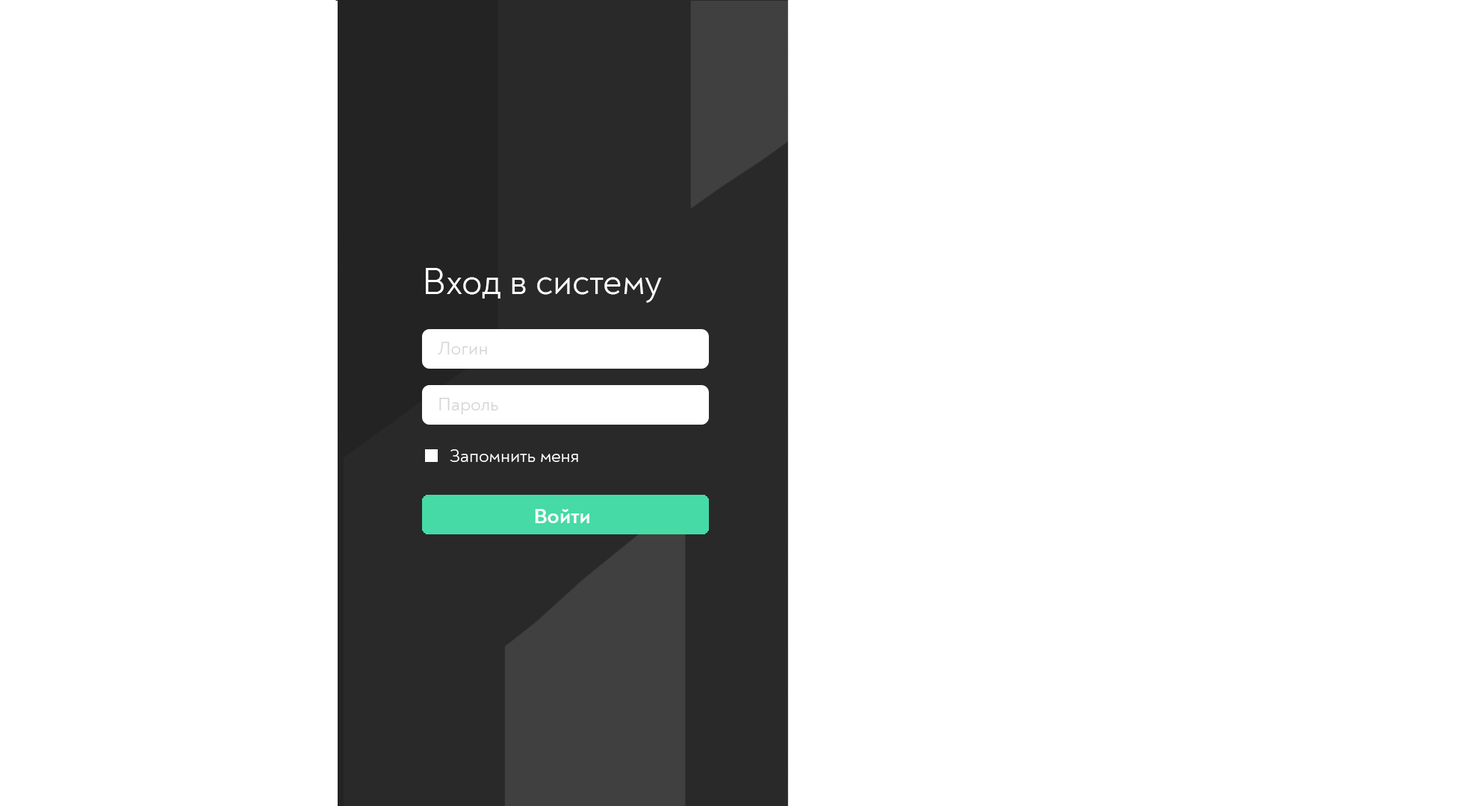
<style>
.page{position:relative;width:1479px;height:806px;background:#ffffff}
.page>*{position:absolute;margin:0}
.t1{font:9px "Noah-Regular";color:#ffffff}
.t2{font:18.7px "Noah-Regular";color:#d5d5d5}
.t3{font:18.7px "Noah-Regular";color:#ffffff}
.t4{font:21.8px "Noah-Bold";color:#ffffff}
</style>
<div class="page">
<p class="t1" style="left:426px;top:268px;width:236px;height:35px">Вход в систему</p>
<p class="t2" style="left:438px;top:342px;width:49px;height:13px">Логин</p>
<p class="t2" style="left:439px;top:398px;width:59px;height:16px">Пароль</p>
<p class="t3" style="left:450px;top:450px;width:128px;height:12px">Запомнить меня</p>
<p class="t4" style="left:535px;top:509px;width:54px;height:14px">Войти</p>
</div>
